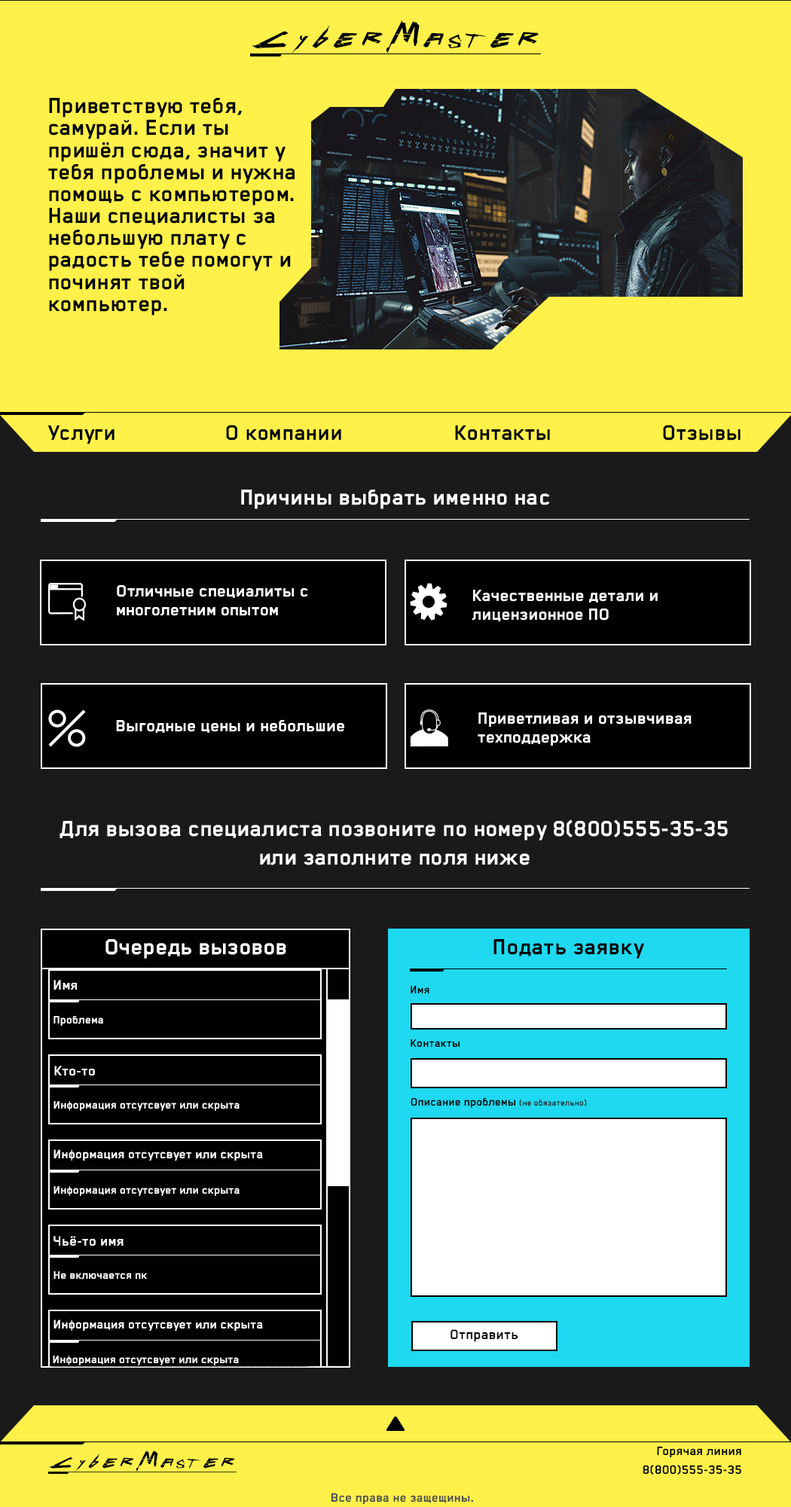
<style>
.page{position:relative;width:791px;height:1507px;background:#1a1a1a}
.page>*{position:absolute;margin:0}
.t1{font:34.5px "Cyberpunk-Regular";color:#000000}
.t2{font:25.1px/22px "BlenderPro-Bold";color:#000000}
.t3{font:24.3px "BlenderPro-Bold";color:#000000}
.t4{font:25.1px "BlenderPro-Bold";color:#ffffff}
.t5{font:4.5px/18.8px "BlenderPro-Bold";color:#ffffff}
.t6{font:4.5px/18.8px "BlenderPro-Bold";color:#000000}
.t7{font:25.1px/28.3px "BlenderPro-Bold";color:#ffffff}
.t8{font:25.1px "BlenderPro-Bold";color:#000000}
.t9{font:15.7px "BlenderPro-Bold";color:#ffffff}
.t10{font:12.6px "BlenderPro-Bold";color:#000000}
.t11{font:12.6px "BlenderPro-Bold";color:#ffffff}
.t12{font:9.4px "BlenderPro-Bold";color:#272727}
.t13{font:14.1px "BlenderPro-Bold";color:#ffffff}
.t14{font:15.7px "BlenderPro-Bold";color:#000000}
.t15{font:22.3px "Cyberpunk-Regular";color:#000000}
.t16{font:14.1px/18.8px "BlenderPro-Bold";color:#000000}
.t17{font:14.1px "BlenderPro-Bold";color:#505050}
</style>
<div class="page">
<p class="t1" style="left:252px;top:20px;width:287px;height:33px">CyberMaster</p>
<p class="t2" style="left:48px;top:98px;width:247px;height:218px">Приветствую тебя, самурай. Если ты пришёл сюда, значит у тебя проблемы и нужна помощь с компьютером. Наши специалисты за небольшую плату с радость тебе помогут и починят твой компьютер.</p>
<p class="t3" style="left:47px;top:425px;width:68px;height:19px">Услуги</p>
<p class="t3" style="left:226px;top:425px;width:115px;height:16px">О компании</p>
<p class="t3" style="left:455px;top:425px;width:95px;height:16px">Контакты</p>
<p class="t3" style="left:663px;top:425px;width:78px;height:16px">Отзывы</p>
<p class="t4" style="left:241px;top:490px;width:309px;height:19px">Причины выбрать именно нас</p>
<p class="t5" style="left:117px;top:585px;width:191px;height:31px">Отличные специалиты с многолетним опытом</p>
<p class="t5" style="left:472px;top:590px;width:186px;height:32px">Качественные детали и лицензионное ПО</p>
<p class="t5" style="left:478px;top:713px;width:214px;height:33px">Приветливая и отзывчивая техподдержка</p>
<p class="t6" style="left:116px;top:720px;width:228px;height:13px"><span class="t5">Выгодные цены и небольшие </span>ценыодные цены и небольшие цены</p>
<p class="t7" style="left:60px;top:820px;width:668px;height:46px;text-align:center">Для вызова специалиста позвоните по номеру 8(800)555-35-35 или заполните поля ниже</p>
<p class="t4" style="left:105px;top:939px;width:181px;height:20px">Очередь вызовов</p>
<p class="t8" style="left:493px;top:939px;width:151px;height:20px">Подать заявку</p>
<p class="t9" style="left:53px;top:980px;width:24px;height:10px">Имя</p>
<p class="t10" style="left:411px;top:986px;width:18px;height:8px">Имя</p>
<p class="t11" style="left:53px;top:1016px;width:50px;height:10px">Проблема</p>
<p class="t10" style="left:411px;top:1040px;width:49px;height:7px">Контакты</p>
<p class="t9" style="left:54px;top:1066px;width:41px;height:10px">Кто-то</p>
<p class="t11" style="left:53px;top:1101px;width:187px;height:10px">Информация отсутсвует или скрыта</p>
<p class="t10" style="left:411px;top:1098px;width:176px;height:10px">Описание проблемы <span class="t12">(не обязательно)</span></p>
<p class="t13" style="left:53px;top:1150px;width:210px;height:11px">Информация отсутсвует или скрыта</p>
<p class="t11" style="left:53px;top:1187px;width:187px;height:9px">Информация отсутсвует или скрыта</p>
<p class="t9" style="left:53px;top:1236px;width:71px;height:10px">Чьё-то имя</p>
<p class="t11" style="left:53px;top:1272px;width:95px;height:8px">Не включается пк</p>
<p class="t13" style="left:53px;top:1320px;width:210px;height:11px">Информация отсутсвует или скрыта</p>
<p class="t14" style="left:451px;top:1330px;width:67px;height:12px">Отправить</p>
<p class="t11" style="left:53px;top:1356px;width:186px;height:10px">Информация отсутсвует или скрыта</p>
<p class="t15" style="left:49px;top:1450px;width:186px;height:22px">CyberMaster</p>
<p class="t16" style="left:643px;top:1446px;width:98px;height:29px;text-align:right">Горячая линия<br>8(800)555-35-35</p>
<p class="t17" style="left:331px;top:1493px;width:142px;height:11px">Все права не защещины.</p>
</div>
